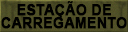
<style>
.page{position:relative;width:128px;height:32px;background:#000000}
.page>*{position:absolute;margin:0}
.t1{font:15.4px/13px "Arial-BoldMT";letter-spacing:0.005em;color:#000000;font-weight:bold;scale:0.91 1}
</style>
<div class="page">
<p class="t1" style="left:1px;top:1px;width:126px;height:28px;text-align:center">ESTAÇÃO DE<br>CARREGAMENTO</p>
</div>
